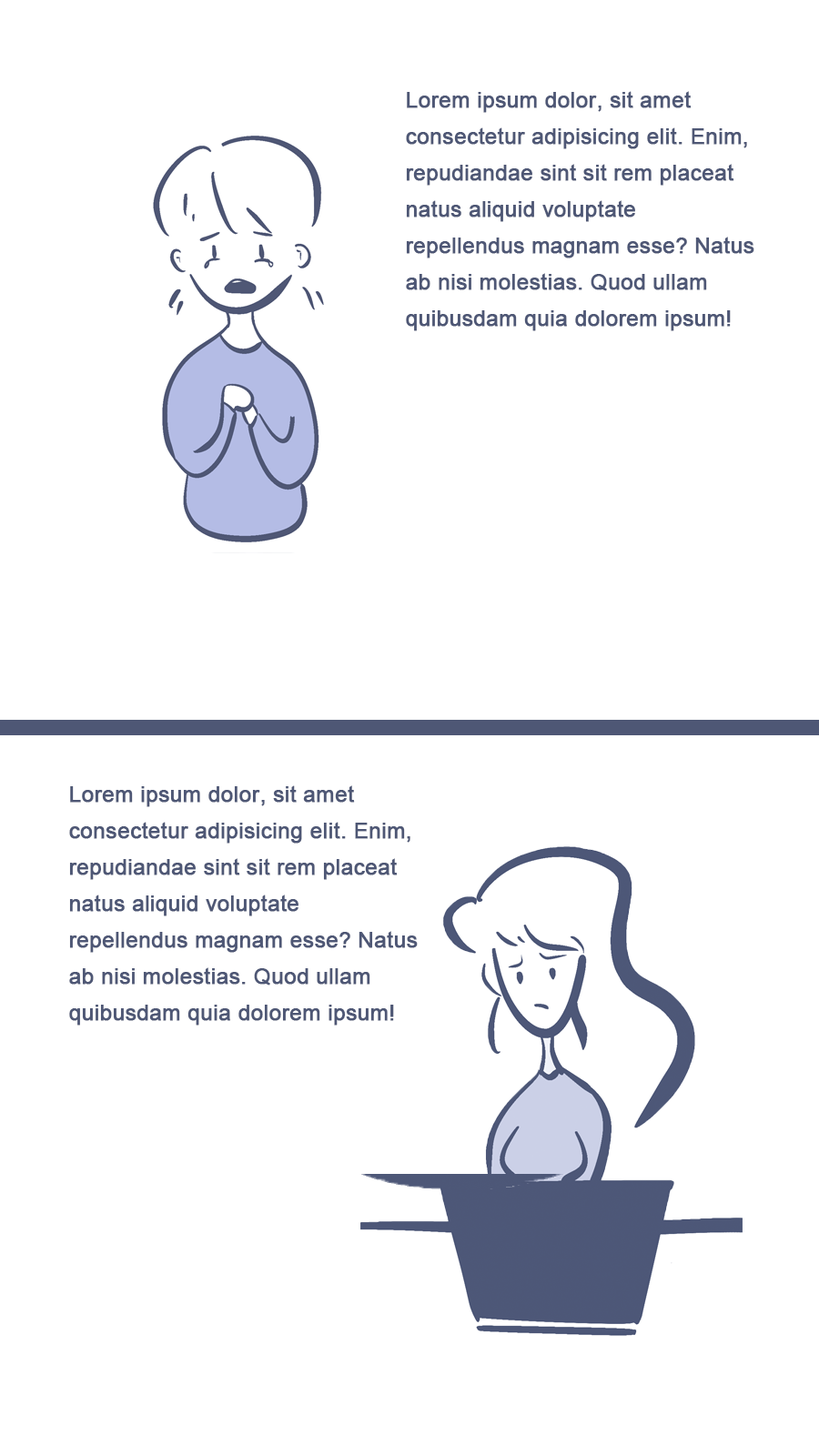
<style>
.page{position:relative;width:819px;height:1456px;background:#ffffff}
.page>*{position:absolute;margin:0}
.t1{font:21.8px/36.4px "ArialMT";color:#4e5775;font-weight:bold}
</style>
<div class="page">
<p class="t1" style="left:406px;top:91px;width:348px;height:240px">Lorem ipsum dolor, sit amet consectetur adipisicing elit. Enim, repudiandae sint sit rem placeat natus aliquid voluptate repellendus magnam esse? Natus ab nisi molestias. Quod ullam quibusdam quia dolorem ipsum!</p>
<p class="t1" style="left:69px;top:785px;width:349px;height:241px">Lorem ipsum dolor, sit amet consectetur adipisicing elit. Enim, repudiandae sint sit rem placeat natus aliquid voluptate repellendus magnam esse? Natus ab nisi molestias. Quod ullam quibusdam quia dolorem ipsum!</p>
</div>
